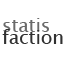
<style>
.page{position:relative;width:64px;height:64px;background:#ffffff}
.page>*{position:absolute;margin:0}
.t1{font:18.5px/12px "LucidaSansUnicode";color:#313131}
.t2{font:18.5px/12px "LucidaSansUnicode";color:#6a6a6a}
</style>
<div class="page">
<p class="t1" style="left:2px;top:18px;width:61px;height:26px"><span class="t2">statis<br></span>faction</p>
</div>
